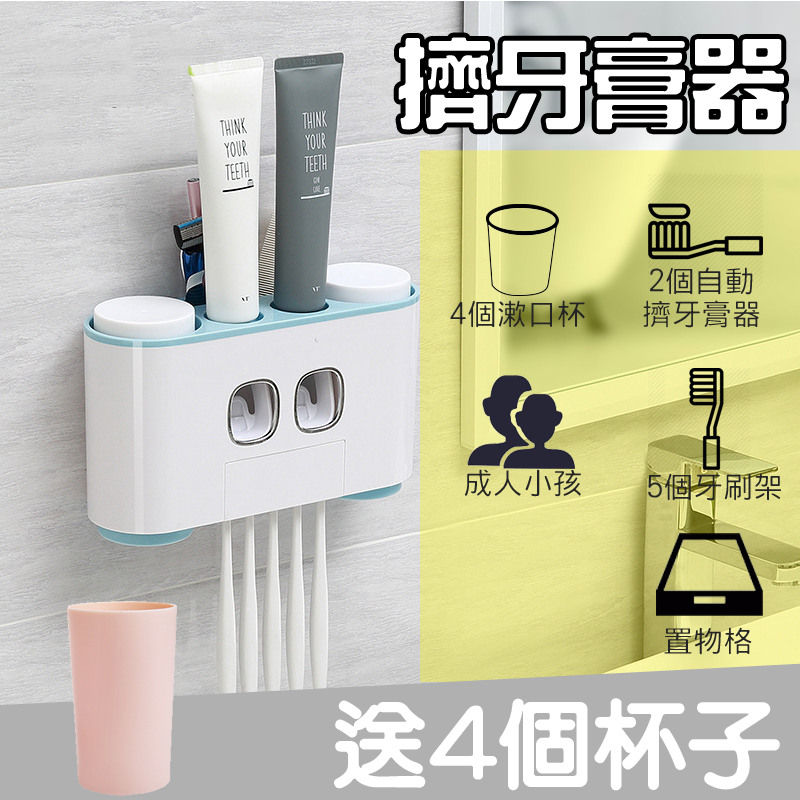
<style>
.page{position:relative;width:800px;height:800px}
.page>*{position:absolute;margin:0}
.t1{font:97.5px "HanWangZonYi";color:#ffffff}
.t2{font:30px "HanWangHeiLight";color:#242424}
.t3{font:94.7px "HanWangYenHeavy";color:#ffffff}
</style>
<div class="page">
<p class="t1" style="left:398px;top:37px;width:386px;height:93px">擠牙膏器</p>
<p class="t2" style="left:643px;top:267px;width:117px;height:61px;text-align:center">2個自動<br>擠牙膏器</p>
<p class="t2" style="left:450px;top:300px;width:135px;height:28px">4個漱口杯</p>
<p class="t2" style="left:465px;top:469px;width:116px;height:28px">成人小孩</p>
<p class="t2" style="left:648px;top:473px;width:133px;height:28px">5個牙刷架</p>
<p class="t2" style="left:664px;top:627px;width:88px;height:28px">置物格</p>
<p class="t3" style="left:334px;top:698px;width:446px;height:93px">送4個杯子</p>
</div>
